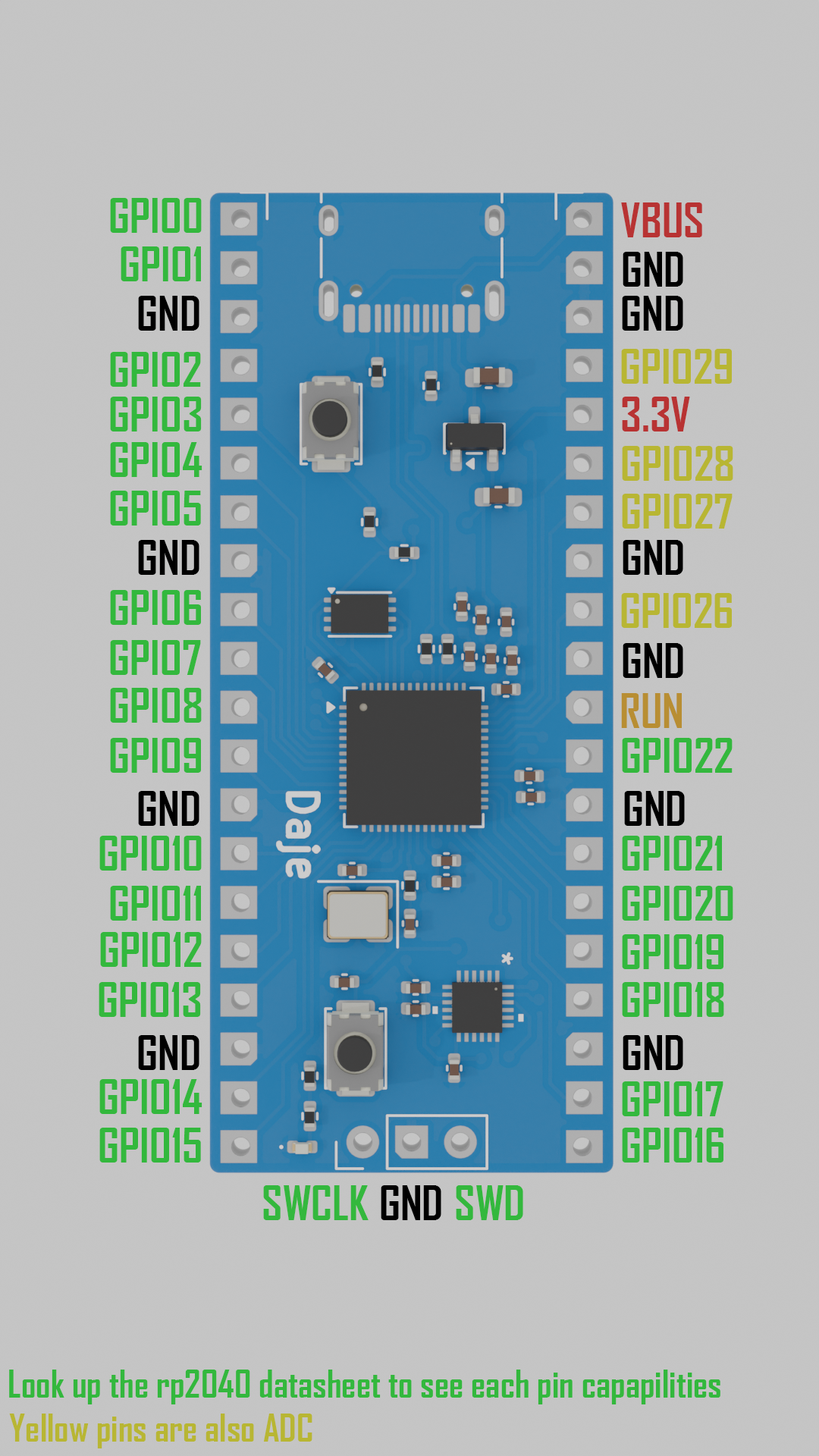
<style>
.page{position:relative;width:819px;height:1456px;background:#c5c5c5}
.page>*{position:absolute;margin:0}
.t1{font:45.5px "AgencyFB-Bold";color:#33b83d}
.t2{font:45.5px "AgencyFB-Bold";color:#b83333}
.t3{font:45.5px "AgencyFB-Bold";color:#000000}
.t4{font:45.5px "AgencyFB-Bold";color:#b8b633}
.t5{font:45.5px "AgencyFB-Bold";color:#b88e33}
.t6{font:36.4px "AgencyFB-Bold";color:#33b83d}
.t7{font:36.4px "AgencyFB-Bold";color:#b8b633}
</style>
<div class="page">
<p class="t1" style="left:110px;top:198px;width:92px;height:35px">GPIO0</p>
<p class="t2" style="left:621px;top:202px;width:81px;height:35px">VBUS</p>
<p class="t1" style="left:121px;top:246px;width:80px;height:35px">GPIO1</p>
<p class="t3" style="left:623px;top:252px;width:60px;height:35px">GND</p>
<p class="t3" style="left:138px;top:296px;width:61px;height:35px">GND</p>
<p class="t3" style="left:622px;top:296px;width:61px;height:35px">GND</p>
<p class="t1" style="left:110px;top:352px;width:91px;height:35px">GPIO2</p>
<p class="t4" style="left:621px;top:349px;width:111px;height:35px">GPIO29</p>
<p class="t1" style="left:110px;top:397px;width:92px;height:34px">GPIO3</p>
<p class="t2" style="left:622px;top:397px;width:68px;height:34px">3.3V</p>
<p class="t1" style="left:110px;top:442px;width:92px;height:35px">GPIO4</p>
<p class="t4" style="left:622px;top:446px;width:111px;height:35px">GPIO28</p>
<p class="t1" style="left:110px;top:491px;width:91px;height:35px">GPIO5</p>
<p class="t4" style="left:622px;top:494px;width:111px;height:35px">GPIO27</p>
<p class="t3" style="left:138px;top:540px;width:61px;height:35px">GND</p>
<p class="t3" style="left:623px;top:540px;width:60px;height:35px">GND</p>
<p class="t1" style="left:110px;top:590px;width:91px;height:35px">GPIO6</p>
<p class="t4" style="left:621px;top:593px;width:111px;height:35px">GPIO26</p>
<p class="t1" style="left:110px;top:640px;width:91px;height:35px">GPIO7</p>
<p class="t3" style="left:623px;top:643px;width:60px;height:35px">GND</p>
<p class="t1" style="left:110px;top:688px;width:92px;height:35px">GPIO8</p>
<p class="t5" style="left:621px;top:693px;width:61px;height:35px">RUN</p>
<p class="t1" style="left:110px;top:738px;width:91px;height:35px">GPIO9</p>
<p class="t1" style="left:622px;top:738px;width:111px;height:35px">GPIO22</p>
<p class="t3" style="left:138px;top:791px;width:61px;height:35px">GND</p>
<p class="t3" style="left:624px;top:791px;width:61px;height:35px">GND</p>
<p class="t1" style="left:99px;top:836px;width:103px;height:35px">GPIO10</p>
<p class="t1" style="left:622px;top:836px;width:100px;height:35px">GPIO21</p>
<p class="t1" style="left:110px;top:886px;width:91px;height:35px">GPIO11</p>
<p class="t1" style="left:622px;top:886px;width:111px;height:35px">GPIO20</p>
<p class="t1" style="left:100px;top:932px;width:102px;height:35px">GPIO12</p>
<p class="t1" style="left:622px;top:934px;width:101px;height:35px">GPIO19</p>
<p class="t1" style="left:99px;top:982px;width:102px;height:35px">GPIO13</p>
<p class="t1" style="left:622px;top:982px;width:102px;height:35px">GPIO18</p>
<p class="t3" style="left:138px;top:1035px;width:61px;height:35px">GND</p>
<p class="t3" style="left:623px;top:1035px;width:60px;height:35px">GND</p>
<p class="t1" style="left:99px;top:1079px;width:103px;height:35px">GPIO14</p>
<p class="t1" style="left:622px;top:1081px;width:101px;height:35px">GPIO17</p>
<p class="t1" style="left:99px;top:1128px;width:102px;height:35px">GPIO15</p>
<p class="t1" style="left:622px;top:1128px;width:101px;height:35px">GPIO16</p>
<p class="t1" style="left:263px;top:1185px;width:106px;height:35px">SWCLK</p>
<p class="t3" style="left:381px;top:1185px;width:60px;height:35px">GND</p>
<p class="t1" style="left:456px;top:1185px;width:67px;height:35px">SWD</p>
<p class="t6" style="left:9px;top:1370px;width:711px;height:34px">Look up the rp2040 datasheet to see each pin capapilities</p>
<p class="t7" style="left:9px;top:1414px;width:303px;height:34px">Yellow pins are also ADC</p>
</div>
